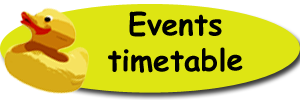
<style>
.page{position:relative;width:300px;height:100px;background:#dee513}
.page>*{position:absolute;margin:0}
.t1{font:30px "ComicSansMS-Bold";color:#000000}
</style>
<div class="page">
<p class="t1" style="left:108px;top:11px;width:135px;height:62px;text-align:center">Events<br>timetable</p>
</div>
